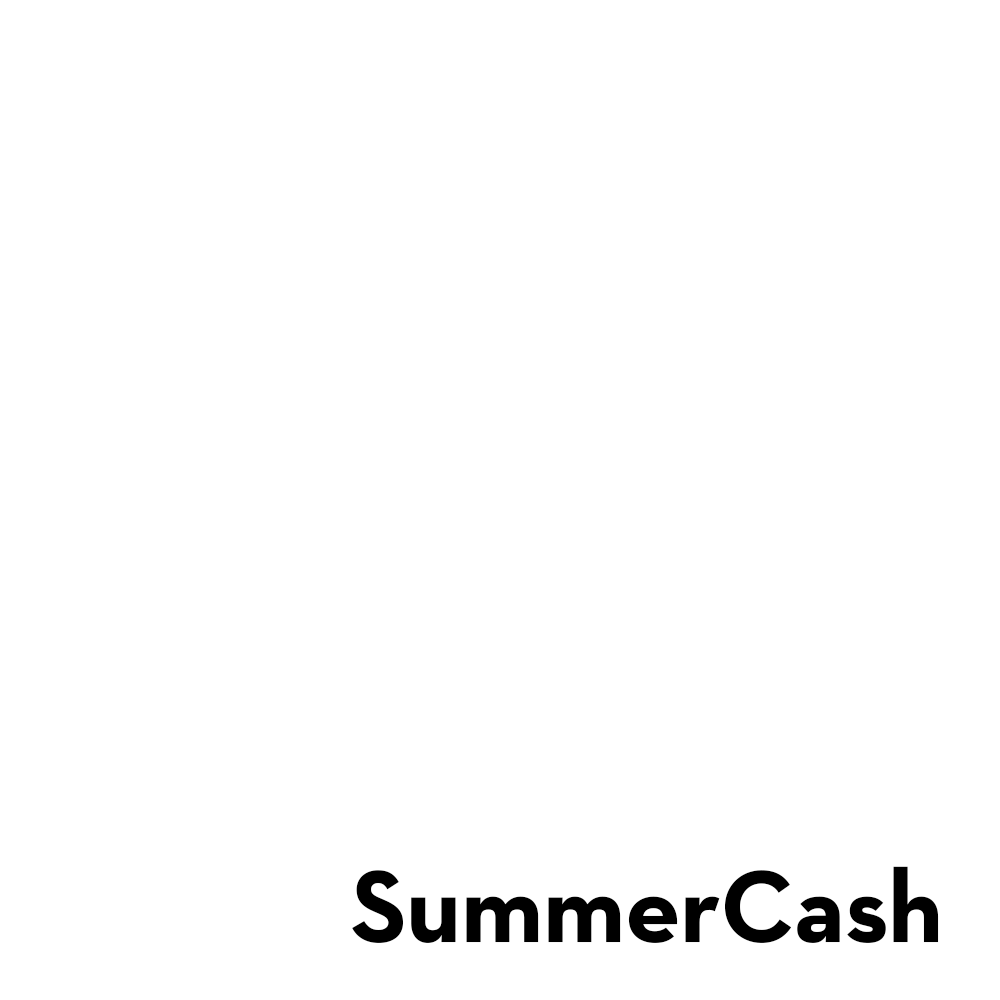
<style>
.page{position:relative;width:1000px;height:1000px;background:#ffffff}
.page>*{position:absolute;margin:0}
.t1{font:104.2px "NeutraText-Bold";letter-spacing:-0.005em;color:#000000}
</style>
<div class="page">
<p class="t1" style="left:352px;top:866px;width:587px;height:77px">SummerCash</p>
</div>
